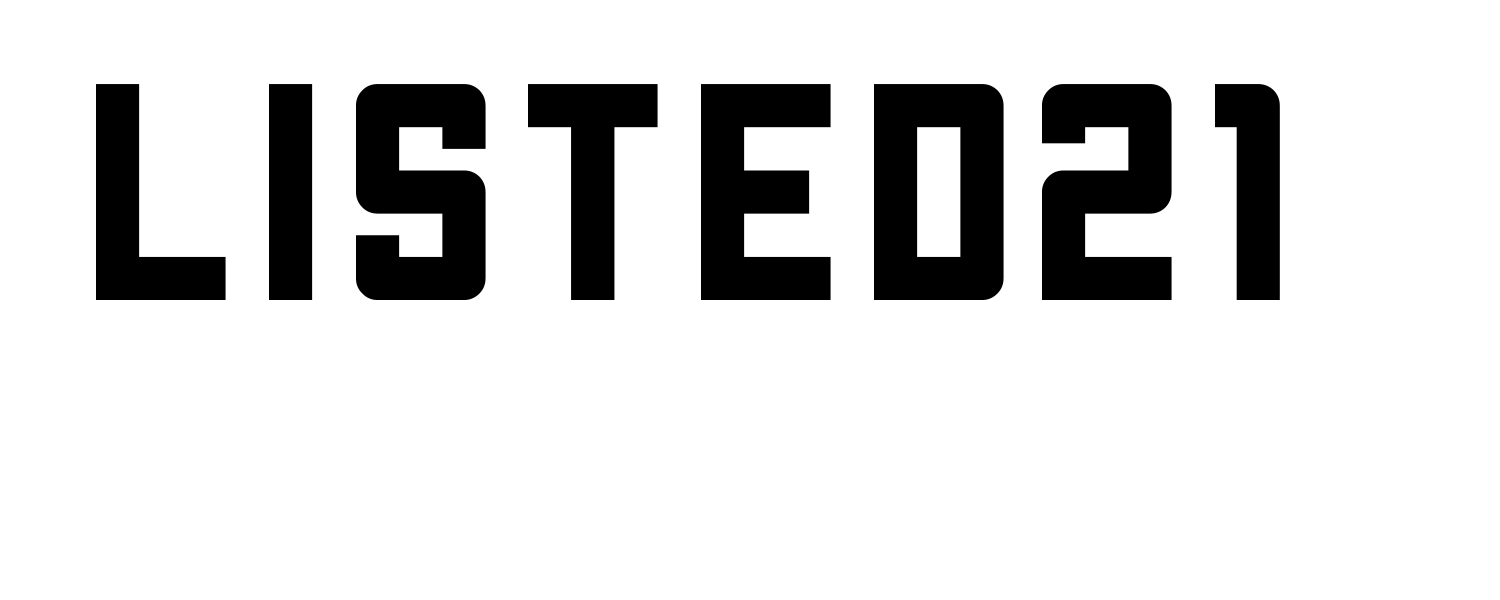
<style>
.page{position:relative;width:1500px;height:600px;background:#ffffff}
.page>*{position:absolute;margin:0}
.t1{font:300px "Cornerstone";color:#000000}
</style>
<div class="page">
<p class="t1" style="left:96px;top:84px;width:1184px;height:216px">listed21</p>
</div>
